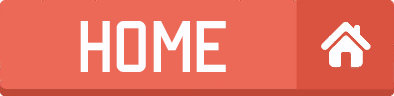
<style>
.page{position:relative;width:394px;height:96px;background:#ec6957}
.page>*{position:absolute;margin:0}
.t1{font:58.3px "Manteka";color:#fdfdff}
</style>
<div class="page">
<p class="t1" style="left:80px;top:21px;width:146px;height:51px">HOME</p>
</div>
